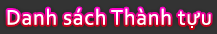
<style>
.page{position:relative;width:217px;height:34px;background:#333333}
.page>*{position:absolute;margin:0}
.t1{font:22px "Corbel";letter-spacing:0.035em;color:#ffffff}
</style>
<div class="page">
<p class="t1" style="left:7px;top:8px;width:204px;height:20px">Danh sách Thành tựu</p>
</div>
